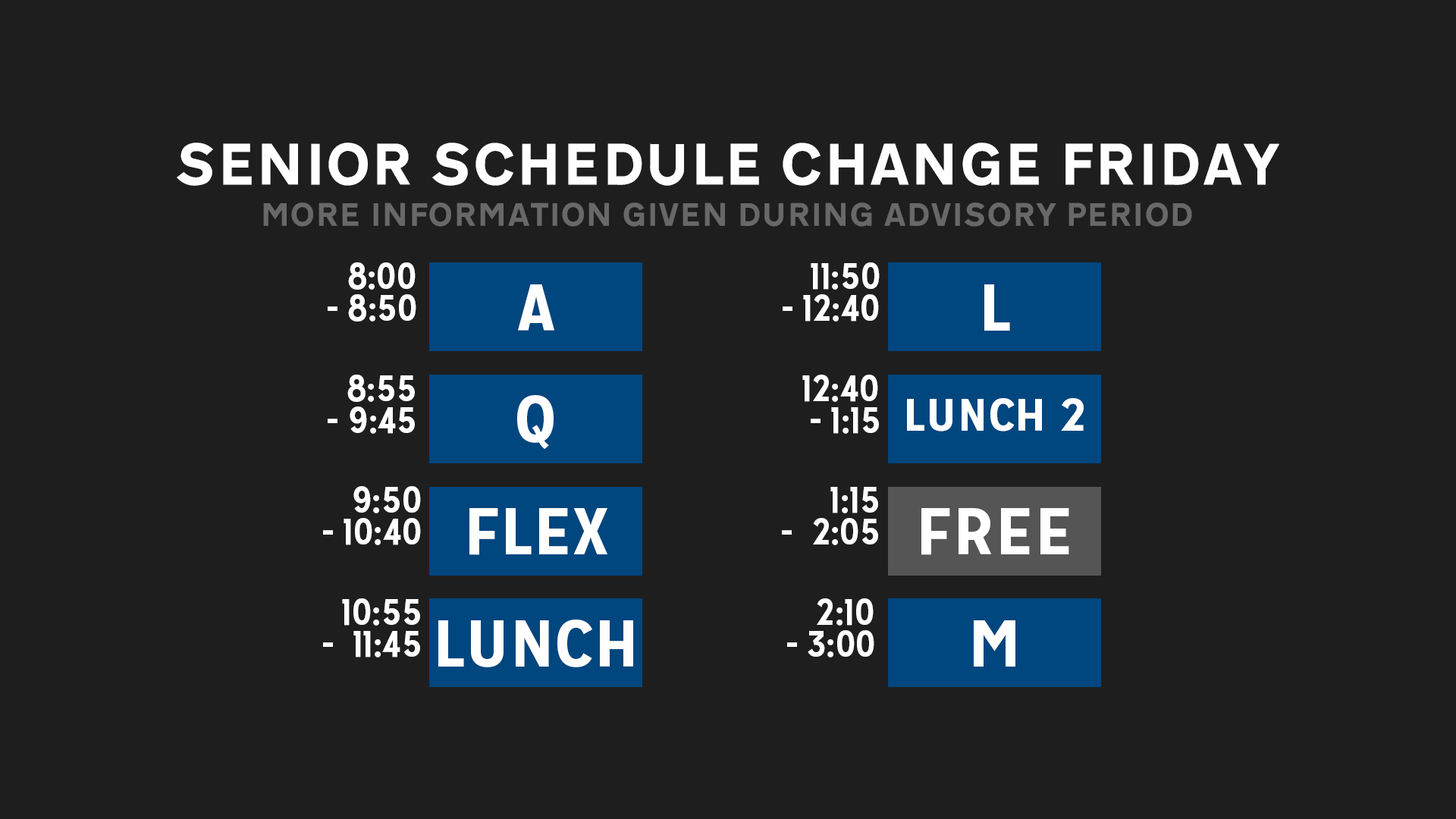
<style>
.page{position:relative;width:1456px;height:819px;background:#1e1e1e}
.page>*{position:absolute;margin:0}
.t1{font:54.6px "TransportHeavy";color:#ffffff}
.t2{font:30.3px "TransportHeavy";color:#676867}
.t3{font:37.2px/31.9px "MissionGothic-Bold";color:#ffffff}
.t4{font:65.9px "MissionGothic-Bold";color:#ffffff;scale:1.15 1}
.t5{font:45.5px "MissionGothic-Bold";color:#ffffff;scale:1.15 1}
</style>
<div class="page">
<p class="t1" style="left:177px;top:143px;width:1102px;height:43px">SENIOR SCHEDULE CHANGE FRIDAY</p>
<p class="t2" style="left:263px;top:202px;width:929px;height:25px">MORE INFORMATION GIVEN DURING ADVISORY PERIOD</p>
<p class="t3" style="left:328px;top:262px;width:88px;height:60px;text-align:center">8:00<br>- 8:50</p>
<p class="t3" style="left:783px;top:262px;width:97px;height:60px;text-align:center">11:50<br>- 12:40</p>
<p class="t4" style="left:518px;top:284px;width:36px;height:47px">A</p>
<p class="t4" style="left:984px;top:284px;width:26px;height:47px">L</p>
<p class="t3" style="left:328px;top:375px;width:87px;height:59px;text-align:center">8:55<br>- 9:45</p>
<p class="t3" style="left:802px;top:375px;width:77px;height:59px;text-align:center">12:40<br>   - 1:15</p>
<p class="t4" style="left:517px;top:395px;width:37px;height:54px">Q</p>
<p class="t5" style="left:907px;top:398px;width:177px;height:33px">LUNCH 2</p>
<p class="t3" style="left:323px;top:486px;width:98px;height:59px;text-align:center">9:50<br>- 10:40</p>
<p class="t3" style="left:782px;top:487px;width:96px;height:58px;text-align:center">1:15<br>-  2:05</p>
<p class="t4" style="left:469px;top:508px;width:138px;height:47px">FLEX</p>
<p class="t4" style="left:921px;top:508px;width:148px;height:47px">FREE</p>
<p class="t3" style="left:323px;top:598px;width:97px;height:59px;text-align:center">10:55<br>-  11:45</p>
<p class="t3" style="left:787px;top:598px;width:87px;height:59px;text-align:center">2:10<br>- 3:00</p>
<p class="t4" style="left:438px;top:620px;width:195px;height:47px">LUNCH</p>
<p class="t4" style="left:974px;top:620px;width:41px;height:47px">M</p>
</div>
